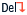
<style>
.page{position:relative;width:27px;height:15px;background:#ffffff}
.page>*{position:absolute;margin:0}
.t1{font:12px "Verdana";letter-spacing:0.025em;color:#03172b;scale:0.75 1}
</style>
<div class="page">
<p class="t1" style="left:1px;top:2px;width:16px;height:14px">Del</p>
</div>
